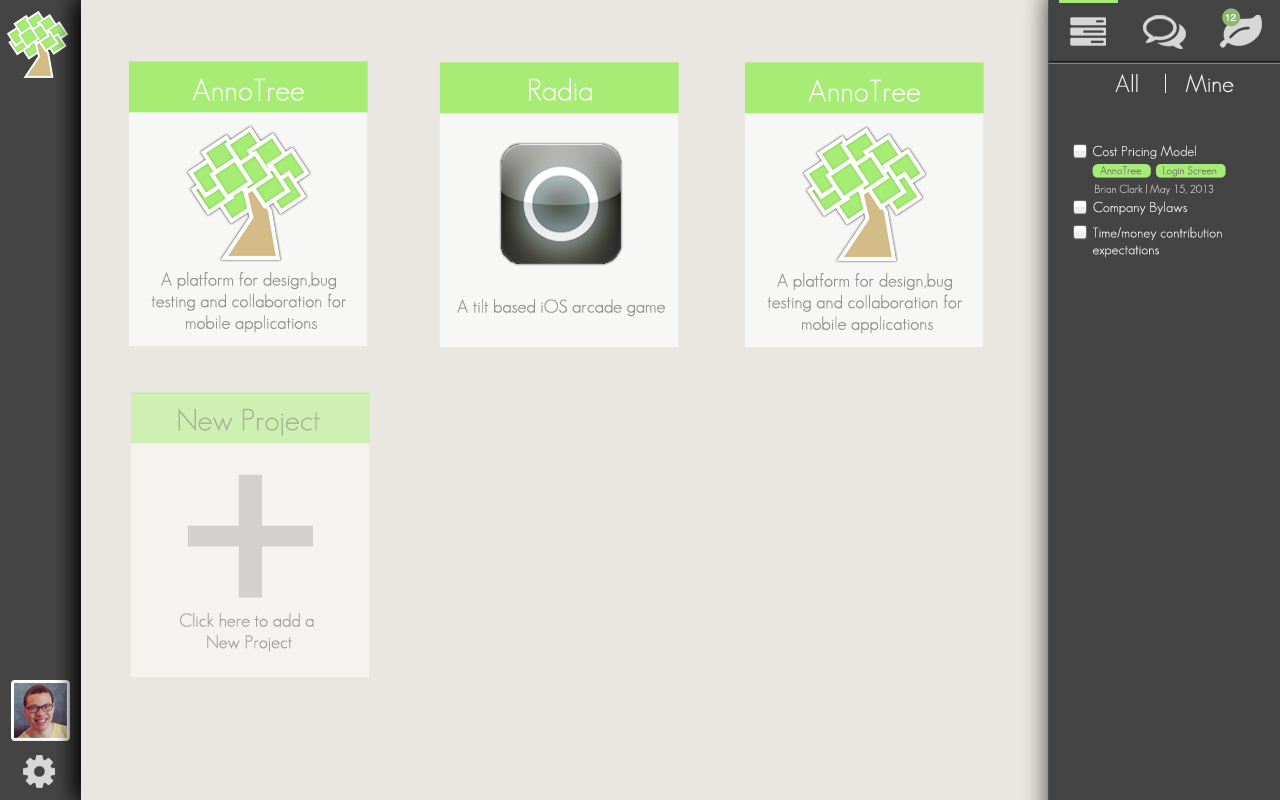
<style>
.page{position:relative;width:1280px;height:800px;background:#eae6e1}
.page>*{position:absolute;margin:0}
.t1{font:10px "Helvetica";color:#ffffff}
.t2{font:30px "GeosansLight";color:#ffffff}
.t3{font:24px "GeosansLight";color:#ececec}
.t4{font:14px "GeosansLight";color:#e9e9e9}
.t5{font:11px "GeosansLight";color:#747474}
.t6{font:11px "GeosansLight";color:#c0c0c0}
.t7{font:18px "GeosansLight";color:#929292}
.t8{font:30px "GeosansLight";color:#a5b697}
.t9{font:500px "GeosansLight";color:#d2d1d0}
.t10{font:18px "GeosansLight";color:#a1a09e}
</style>
<div class="page">
<p class="t1" style="left:1225px;top:13px;width:11px;height:8px">12</p>
<p class="t2" style="left:192px;top:78px;width:112px;height:23px">AnnoTree</p>
<p class="t2" style="left:529px;top:78px;width:63px;height:23px">Radia</p>
<p class="t3" style="left:1115px;top:73px;width:119px;height:20px">All    |   Mine</p>
<p class="t2" style="left:808px;top:79px;width:112px;height:23px">AnnoTree</p>
<p class="t4" style="left:1093px;top:145px;width:103px;height:14px">Cost Pricing Model</p>
<p class="t5" style="left:1100px;top:166px;width:42px;height:9px">AnnoTree</p>
<p class="t5" style="left:1163px;top:166px;width:54px;height:11px">Login Screen</p>
<p class="t6" style="left:1095px;top:184px;width:119px;height:11px">Brian Clark | May 15, 2013</p>
<p class="t4" style="left:1093px;top:201px;width:95px;height:14px">Company Bylaws</p>
<p class="t4" style="left:1092px;top:227px;width:130px;height:31px">Time/money contribution <br>expectations</p>
<p class="t7" style="left:151px;top:272px;width:195px;height:61px;text-align:center">A platform for design,bug <br>testing and collaboration for <br>mobile applications</p>
<p class="t7" style="left:767px;top:273px;width:195px;height:61px;text-align:center">A platform for design,bug <br>testing and collaboration for <br>mobile applications</p>
<p class="t7" style="left:457px;top:299px;width:208px;height:18px">A tilt based iOS arcade game</p>
<p class="t8" style="left:178px;top:408px;width:142px;height:28px">New Project</p>
<p class="t9" style="left:187px;top:474px;width:126px;height:124px">+</p>
<p class="t10" style="left:180px;top:613px;width:134px;height:39px;text-align:center">Click here to add a <br>New Project</p>
</div>
